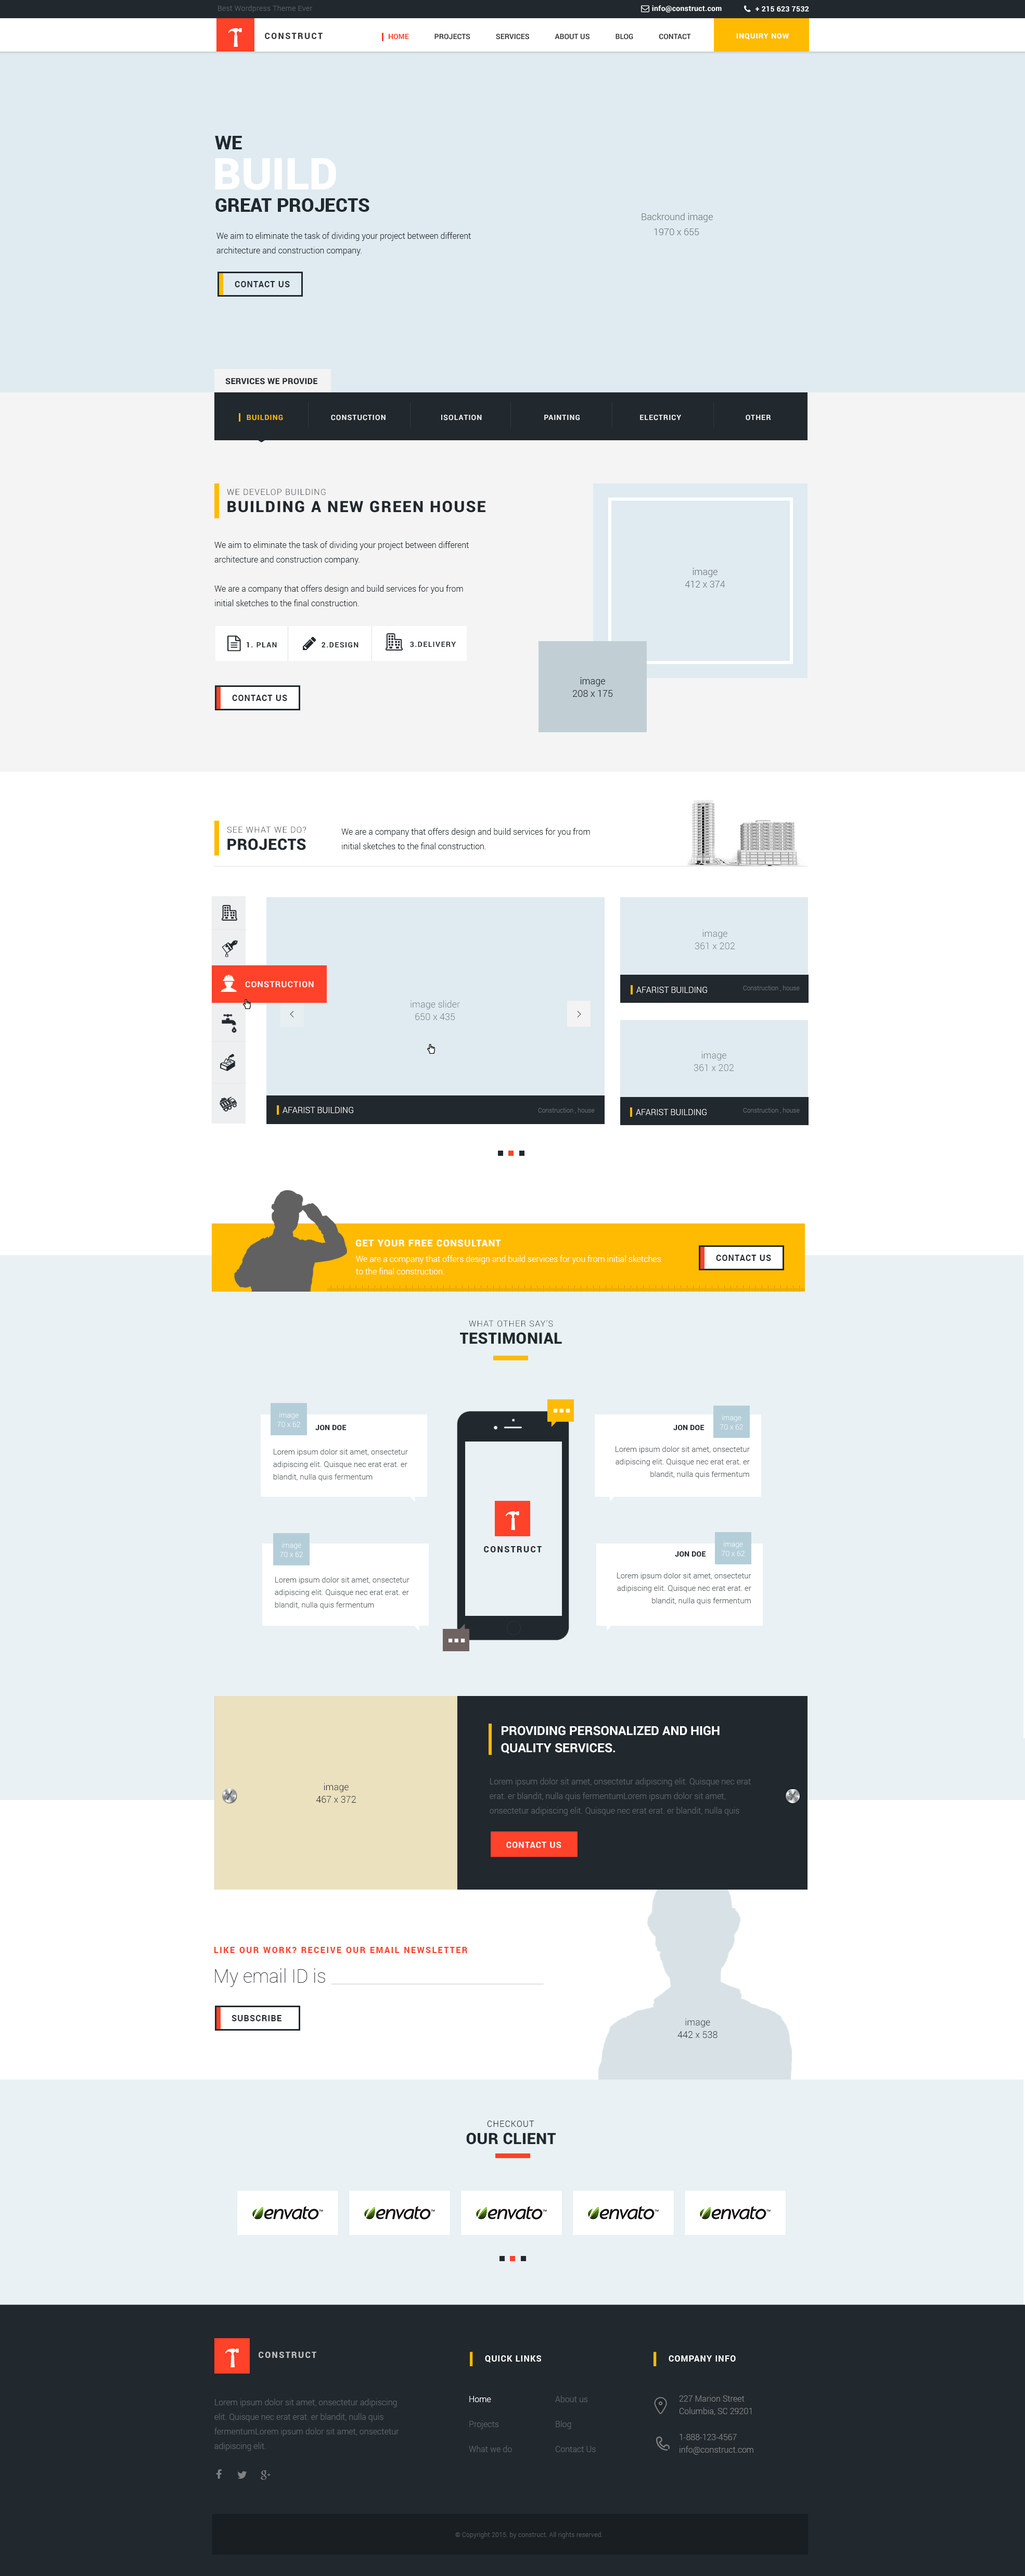
<style>
.page{position:relative;width:1025px;height:2576px;background:#ffffff}
.page>*{position:absolute;margin:0}
.t1{font:7.3px "Roboto-Light";letter-spacing:0.025em;color:#5a5f63}
.t2{font:7.3px "Roboto-Bold";letter-spacing:0.025em;color:#ffffff}
.t3{font:8.3px "Roboto-Black";letter-spacing:0.15em;color:#353537;text-transform:uppercase}
.t4{font:7.3px "Roboto-Bold";color:#353537}
.t5{font:7.3px "Roboto-Bold";color:#ff4229}
.t6{font:7.3px "Roboto-Bold";letter-spacing:0.075em;color:#ffffff;text-transform:uppercase}
.t7{font:18.7px/12.5px "Roboto-Black";color:#21282e;text-transform:uppercase}
.t8{font:44.3px "Roboto-Black";color:#ffffff;text-transform:uppercase}
.t9{font:9.4px "Roboto-Light";color:#767d81}
.t10{font:8.3px/14.6px "Roboto-Light";color:#21282e}
.t11{font:8.3px "Roboto-Bold";letter-spacing:0.075em;color:#21282e;text-transform:uppercase}
.t12{font:8.3px "Roboto-Black";letter-spacing:0.02em;color:#21282e;text-transform:uppercase}
.t13{font:7.3px "Roboto-Bold";letter-spacing:0.075em;color:#f3f3f3;text-transform:uppercase}
.t14{font:7.3px "Roboto-Bold";letter-spacing:0.075em;color:#ffbb02;text-transform:uppercase}
.t15{font:8.3px "Roboto-Light";letter-spacing:0.075em;color:#21282e;text-transform:uppercase}
.t16{font:15.6px "Roboto-Black";letter-spacing:0.075em;color:#21282e;text-transform:uppercase}
.t17{font:9.4px/12.5px "Roboto-Light";color:#767d81}
.t18{font:7.3px "Roboto-Bold";letter-spacing:0.1em;color:#21282e}
.t19{font:7.3px "Roboto-Bold";letter-spacing:0.1em;color:#21282e;text-transform:uppercase}
.t20{font:9.4px/12.5px "Roboto-Light";color:#21282e}
.t21{font:15.6px "Roboto-Black";letter-spacing:0.02em;color:#21282e;text-transform:uppercase}
.t22{font:8.3px "Roboto-Bold";letter-spacing:0.075em;color:#f3f3f3;text-transform:uppercase}
.t23{font:8.3px "Roboto-Light";color:#f3f3f3;text-transform:uppercase}
.t24{font:6.2px "Roboto-Light";color:#656c72}
.t25{font:9.4px "Quicksand-Regular";letter-spacing:0.1em;color:#21282e}
.t26{font:9.4px "Roboto-Black";letter-spacing:0.075em;color:#ffffff;text-transform:uppercase}
.t27{font:8.3px/12.5px "Roboto-Light";color:#ffffff}
.t28{font:7.3px/9.4px "Roboto-Light";color:#ffffff}
.t29{font:7.3px "Roboto-Black";letter-spacing:0.02em;color:#21282e;text-transform:uppercase}
.t30{font:7.8px/12.5px "Roboto-Light";color:#5e656a}
.t31{font:8.3px "Roboto-Black";letter-spacing:0.15em;color:#21282e;text-transform:uppercase}
.t32{font:12.5px/17.2px "Roboto-Bold";color:#ffffff}
.t33{font:8.3px/14.6px "Roboto-Light";color:#5e656a}
.t34{font:8.3px "Roboto-Bold";letter-spacing:0.075em;color:#ffffff;text-transform:uppercase}
.t35{font:8.3px "Roboto-Black";letter-spacing:0.15em;color:#ff4229;text-transform:uppercase}
.t36{font:18.7px "Roboto-Thin";color:#21282e}
.t37{font:8.3px "Roboto-Black";letter-spacing:0.15em;color:#c0bfbe;text-transform:uppercase}
.t38{font:8.3px/25px "Roboto-Light";color:#5e656a}
.t39{font:8.3px/25px "Roboto-Light";color:#ffffff}
.t40{font:8.3px/12.5px "Roboto-Light";color:#828282}
.t41{font:6.2px "Roboto-Light";letter-spacing:0.025em;color:#52595e}
</style>
<div class="page">
<p class="t1" style="left:218px;top:5px;width:95px;height:7px">Best Wordpress Theme Ever</p>
<p class="t2" style="left:652px;top:5px;width:70px;height:7px">info@construct.com</p>
<p class="t2" style="left:756px;top:6px;width:53px;height:6px">+ 215 623 7532</p>
<p class="t3" style="left:265px;top:33px;width:58px;height:6px">Construct</p>
<p class="t4" style="left:389px;top:34px;width:302px;height:6px"><span class="t5">HOME</span>              PROJECTS              SERVICES              ABOUT US              BLOG              CONTACT</p>
<p class="t6" style="left:736px;top:33px;width:53px;height:7px">Inquiry Now</p>
<p class="t7" style="left:215px;top:136px;width:154px;height:76px">We <br><br><br><br><br> Great Projects</p>
<p class="t8" style="left:215px;top:158px;width:121px;height:32px">Build</p>
<p class="t9" style="left:642px;top:213px;width:71px;height:9px">Backround image</p>
<p class="t10" style="left:216px;top:232px;width:255px;height:24px">We aim to eliminate the task of dividing your project between different <br>architecture and construction company.</p>
<p class="t9" style="left:654px;top:228px;width:45px;height:7px">1970 x 655</p>
<p class="t11" style="left:235px;top:281px;width:55px;height:6px">Contact US</p>
<p class="t12" style="left:225px;top:378px;width:92px;height:7px">Services we Provide</p>
<p class="t13" style="left:247px;top:415px;width:524px;height:5px"><span class="t14">Building</span>                    Constuction                       Isolation                          Painting                         Electricy                           Other</p>
<p class="t15" style="left:227px;top:489px;width:99px;height:6px">we develop Building</p>
<p class="t16" style="left:227px;top:501px;width:259px;height:12px">Building a New Green House</p>
<p class="t10" style="left:214px;top:541px;width:255px;height:65px">We aim to eliminate the task of dividing your project between different architecture and construction company. <br><br>We are a company that offers design and build services for you from initial sketches to the final construction.</p>
<p class="t17" style="left:685px;top:568px;width:40px;height:20px;text-align:center">image<br>412 x 374</p>
<p class="t18" style="left:410px;top:642px;width:46px;height:5px">3.DELIVERY</p>
<p class="t19" style="left:247px;top:642px;width:30px;height:5px">1. Plan</p>
<p class="t19" style="left:322px;top:642px;width:37px;height:6px">2.DESIGN</p>
<p class="t20" style="left:572px;top:677px;width:41px;height:20px;text-align:center">image<br>208 x 175</p>
<p class="t11" style="left:232px;top:695px;width:55px;height:6px">Contact US</p>
<p class="t15" style="left:227px;top:826px;width:79px;height:7px">See What we Do?</p>
<p class="t10" style="left:341px;top:828px;width:249px;height:21px">We are a company that offers design and build services for you from initial sketches to the final construction.</p>
<p class="t21" style="left:227px;top:838px;width:79px;height:12px">Projects</p>
<p class="t17" style="left:695px;top:929px;width:40px;height:21px;text-align:center">image<br>361 x 202</p>
<p class="t22" style="left:245px;top:981px;width:69px;height:7px">Construction</p>
<p class="t23" style="left:636px;top:987px;width:71px;height:6px">Afarist Building</p>
<p class="t24" style="left:743px;top:985px;width:57px;height:6px">Construction , house</p>
<p class="t17" style="left:411px;top:1000px;width:49px;height:21px;text-align:center">image slider<br>650 x 435</p>
<p class="t25" style="left:290px;top:1011px;width:4px;height:6px;rotate:180deg">&gt;</p>
<p class="t25" style="left:577px;top:1011px;width:4px;height:6px">&gt;</p>
<p class="t17" style="left:694px;top:1051px;width:40px;height:21px;text-align:center">image<br>361 x 202</p>
<p class="t23" style="left:283px;top:1107px;width:70px;height:6px">Afarist Building</p>
<p class="t24" style="left:538px;top:1107px;width:57px;height:7px">Construction , house</p>
<p class="t23" style="left:636px;top:1109px;width:71px;height:6px">Afarist Building</p>
<p class="t24" style="left:743px;top:1107px;width:57px;height:7px">Construction , house</p>
<p class="t26" style="left:356px;top:1240px;width:145px;height:7px">Get Your Free Consultant</p>
<p class="t27" style="left:356px;top:1255px;width:305px;height:19px">We are a company that offers design and build services for you from initial sketches <br>to the final construction.</p>
<p class="t11" style="left:716px;top:1255px;width:55px;height:6px">Contact US</p>
<p class="t15" style="left:469px;top:1320px;width:84px;height:7px">What other say’s</p>
<p class="t21" style="left:460px;top:1332px;width:102px;height:12px">Testimonial</p>
<p class="t28" style="left:277px;top:1412px;width:23px;height:15px;text-align:center">image<br>70 x 62</p>
<p class="t28" style="left:720px;top:1414px;width:23px;height:16px;text-align:center">image<br>70 x 62</p>
<p class="t29" style="left:315px;top:1425px;width:32px;height:6px">Jon Doe</p>
<p class="t29" style="left:673px;top:1425px;width:32px;height:6px">Jon Doe</p>
<p class="t30" style="left:273px;top:1449px;width:135px;height:32px">Lorem ipsum dolor sit amet, onsectetur adipiscing elit. Quisque nec erat erat. er blandit, nulla quis fermentum</p>
<p class="t30" style="left:616px;top:1446px;width:134px;height:32px;text-align:right">Lorem ipsum dolor sit amet, onsectetur adipiscing elit. Quisque nec erat erat. er blandit, nulla quis fermentum</p>
<p class="t28" style="left:280px;top:1542px;width:23px;height:16px;text-align:center">image<br>70 x 62</p>
<p class="t28" style="left:722px;top:1541px;width:23px;height:16px;text-align:center">image<br>70 x 62</p>
<p class="t31" style="left:484px;top:1546px;width:58px;height:6px">Construct</p>
<p class="t29" style="left:675px;top:1551px;width:31px;height:6px">Jon Doe</p>
<p class="t30" style="left:275px;top:1577px;width:135px;height:32px">Lorem ipsum dolor sit amet, onsectetur adipiscing elit. Quisque nec erat erat. er blandit, nulla quis fermentum</p>
<p class="t30" style="left:617px;top:1573px;width:134px;height:32px;text-align:right">Lorem ipsum dolor sit amet, onsectetur adipiscing elit. Quisque nec erat erat. er blandit, nulla quis fermentum</p>
<p class="t32" style="left:501px;top:1726px;width:219px;height:28px">PROVIDING PERSONALIZED AND HIGH <br>QUALITY SERVICES.</p>
<p class="t33" style="left:490px;top:1778px;width:261px;height:38px">Lorem ipsum dolor sit amet, onsectetur adipiscing elit. Quisque nec erat erat. er blandit, nulla quis fermentumLorem ipsum dolor sit amet, onsectetur adipiscing elit. Quisque nec erat erat. er blandit, nulla quis fermentum</p>
<p class="t20" style="left:316px;top:1783px;width:40px;height:20px;text-align:center">image<br>467 x 372</p>
<p class="t34" style="left:506px;top:1842px;width:56px;height:6px">Contact US</p>
<p class="t35" style="left:214px;top:1947px;width:253px;height:6px">Like our work? Receive our email newsletter</p>
<p class="t36" style="left:215px;top:1968px;width:110px;height:19px">My email ID is</p>
<p class="t11" style="left:232px;top:2015px;width:50px;height:6px">Subscribe</p>
<p class="t20" style="left:678px;top:2018px;width:40px;height:20px;text-align:center">image<br>442 x 538</p>
<p class="t15" style="left:487px;top:2121px;width:47px;height:6px">Checkout</p>
<p class="t21" style="left:466px;top:2133px;width:90px;height:12px">Our Client</p>
<p class="t37" style="left:259px;top:2352px;width:57px;height:6px">Construct</p>
<p class="t34" style="left:485px;top:2355px;width:56px;height:8px">Quick Links</p>
<p class="t34" style="left:669px;top:2355px;width:67px;height:7px">Company Info</p>
<p class="t33" style="left:214px;top:2399px;width:185px;height:52px">Lorem ipsum dolor sit amet, onsectetur adipiscing elit. Quisque nec erat erat. er blandit, nulla quis fermentumLorem ipsum dolor sit amet, onsectetur adipiscing elit.</p>
<p class="t38" style="left:469px;top:2396px;width:43px;height:56px"><span class="t39">Home<br></span>Projects<br>What we do</p>
<p class="t38" style="left:555px;top:2395px;width:41px;height:57px">About us<br>Blog<br>Contact Us</p>
<p class="t40" style="left:679px;top:2395px;width:73px;height:20px">227 Marion Street<br>Columbia, SC 29201</p>
<p class="t40" style="left:680px;top:2434px;width:74px;height:21px">1-888-123-4567<br>info@construct.com</p>
<p class="t41" style="left:455px;top:2532px;width:148px;height:7px">© Copyright 2015. by construct. All rights reserved.</p>
</div>
